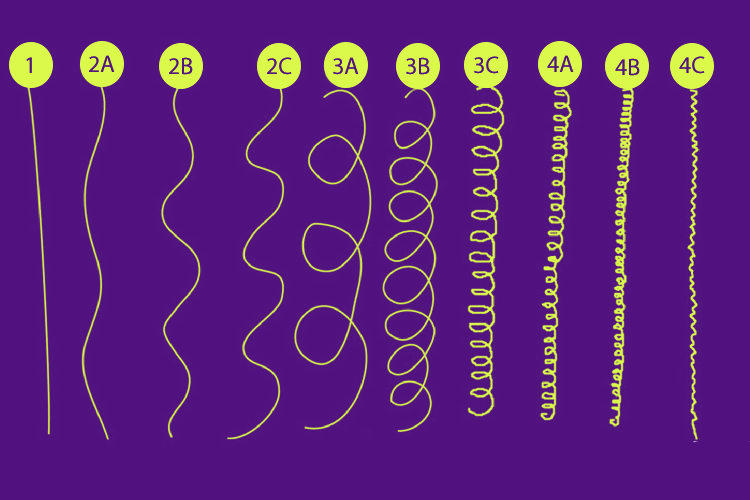
<style>
.page{position:relative;width:750px;height:500px;background:#51127f}
.page>*{position:absolute;margin:0}
.t1{font:24px "MyriadPro-Regular";color:#53157e}
</style>
<div class="page">
<p class="t1" style="left:26px;top:57px;width:6px;height:16px">1</p>
<p class="t1" style="left:89px;top:55px;width:26px;height:17px">2A</p>
<p class="t1" style="left:169px;top:57px;width:24px;height:18px">2B</p>
<p class="t1" style="left:267px;top:57px;width:25px;height:18px">2C</p>
<p class="t1" style="left:333px;top:57px;width:26px;height:18px">3A</p>
<p class="t1" style="left:406px;top:57px;width:24px;height:18px">3B</p>
<p class="t1" style="left:474px;top:56px;width:25px;height:18px">3C</p>
<p class="t1" style="left:547px;top:55px;width:27px;height:17px">4A</p>
<p class="t1" style="left:615px;top:58px;width:25px;height:18px">4B</p>
</div>
